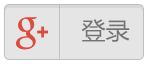
<style>
.page{position:relative;width:148px;height:64px;background:#e5e5e5}
.page>*{position:absolute;margin:0}
.t1{font:24px "MicrosoftYaHei";letter-spacing:0.01em;color:#737373}
</style>
<div class="page">
<p class="t1" style="left:81px;top:19px;width:49px;height:23px">登录</p>
</div>
